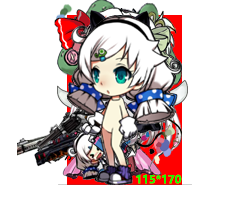
<style>
.page{position:relative;width:250px;height:200px;background:#ffffff}
.page>*{position:absolute;margin:0}
.t1{font:11px "MicrosoftYaHei-Bold";color:#12ff00}
</style>
<div class="page">
<p class="t1" style="left:136px;top:174px;width:46px;height:10px">115*170</p>
</div>
